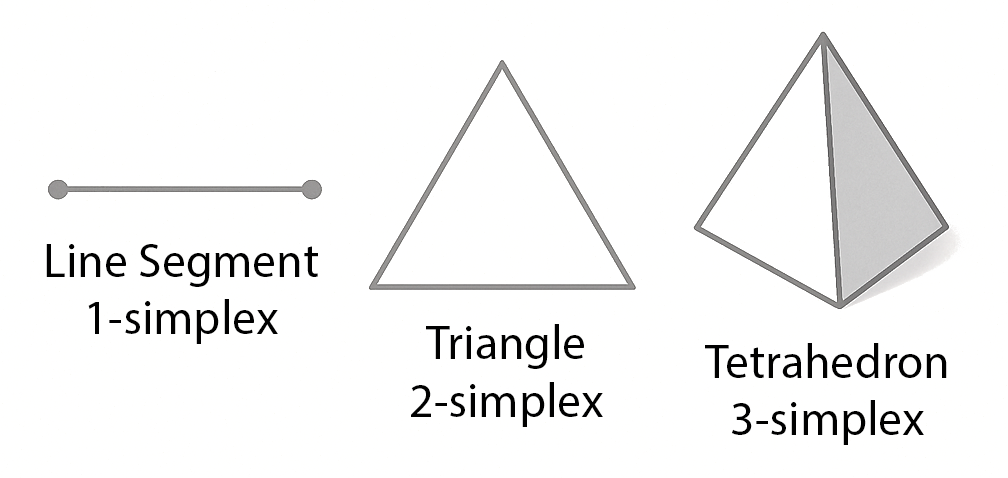
<style>
.page{position:relative;width:1008px;height:478px;background:#ffffff}
.page>*{position:absolute;margin:0}
.t1{font:48px "MyriadPro-Regular";color:#000000}
</style>
<div class="page">
<p class="t1" style="left:46px;top:244px;width:272px;height:100px;text-align:center">Line Segment<br>1-simplex</p>
<p class="t1" style="left:411px;top:324px;width:192px;height:103px;text-align:center">Triangle<br>2-simplex</p>
<p class="t1" style="left:705px;top:343px;width:242px;height:102px;text-align:center">Tetrahedron<br>3-simplex</p>
</div>
